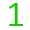
<style>
.page{position:relative;width:30px;height:30px;background:#ffffff}
.page>*{position:absolute;margin:0}
.t1{font:30px "Monaco";color:#20c20e}
</style>
<div class="page">
<p class="t1" style="left:9px;top:3px;width:14px;height:23px">1</p>
</div>
